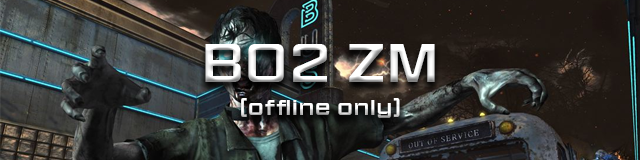
<style>
.page{position:relative;width:640px;height:160px}
.page>*{position:absolute;margin:0}
.t1{font:50px "HitmarkerNormal-Regular";letter-spacing:0.12em;color:#ffffff}
.t2{font:20px "HitmarkerNormal-Regular";letter-spacing:0.12em}
</style>
<div class="page">
<p class="t1" style="left:205px;top:44px;width:230px;height:38px">BO2 ZM</p>
<p class="t2" style="left:241px;top:98px;width:159px;height:20px">(offline only)</p>
</div>
